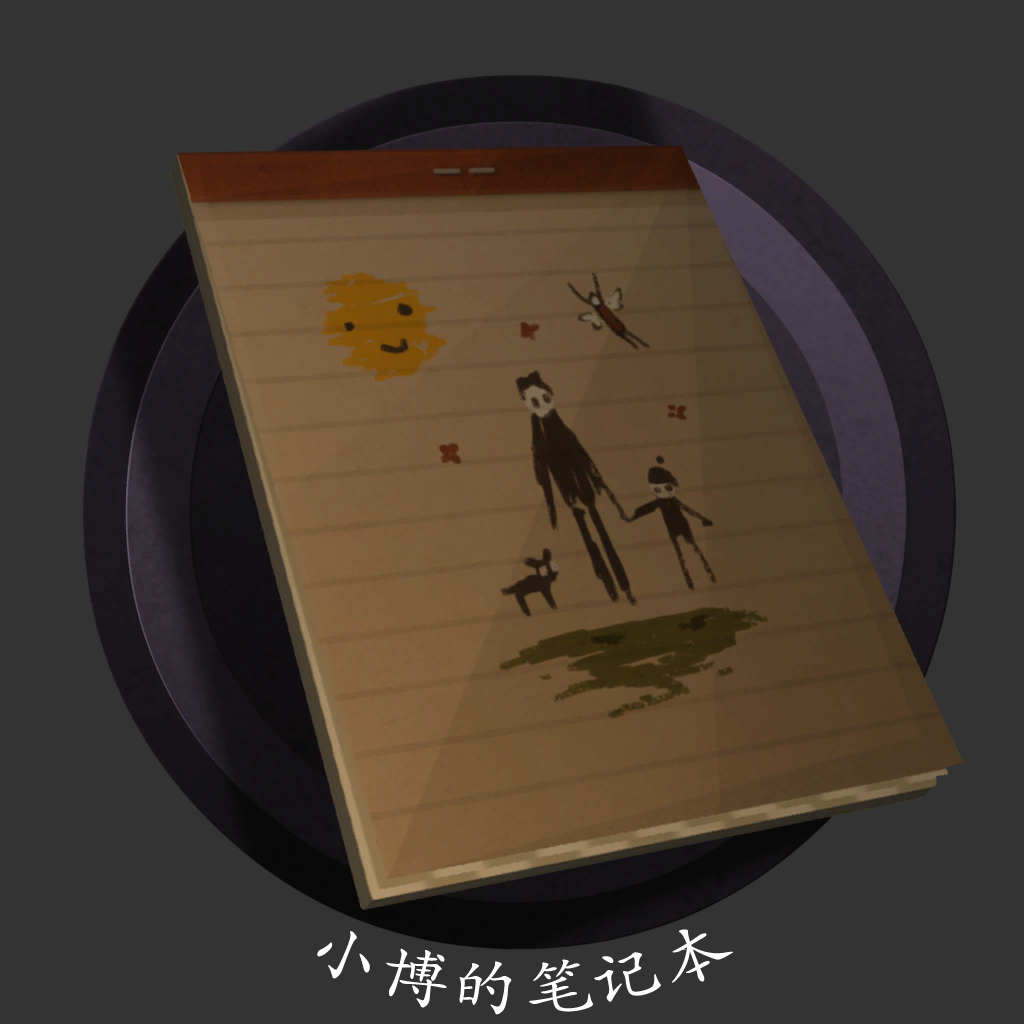
<style>
.page{position:relative;width:1024px;height:1024px;background:#333333}
.page>*{position:absolute;margin:0}
.t1{font:64px "STKaiti";color:#ffffff}
</style>
<div class="page">
<p class="t1" style="left:317px;top:929px;width:416px;height:86px">小博的笔记本</p>
</div>
